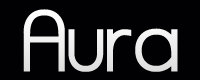
<style>
.page{position:relative;width:200px;height:80px;background:#010103}
.page>*{position:absolute;margin:0}
.t1{font:100px "Asenine";color:#ffffff;font-weight:bold}
</style>
<div class="page">
<p class="t1" style="left:23px;top:9px;width:155px;height:63px">Aura</p>
</div>
